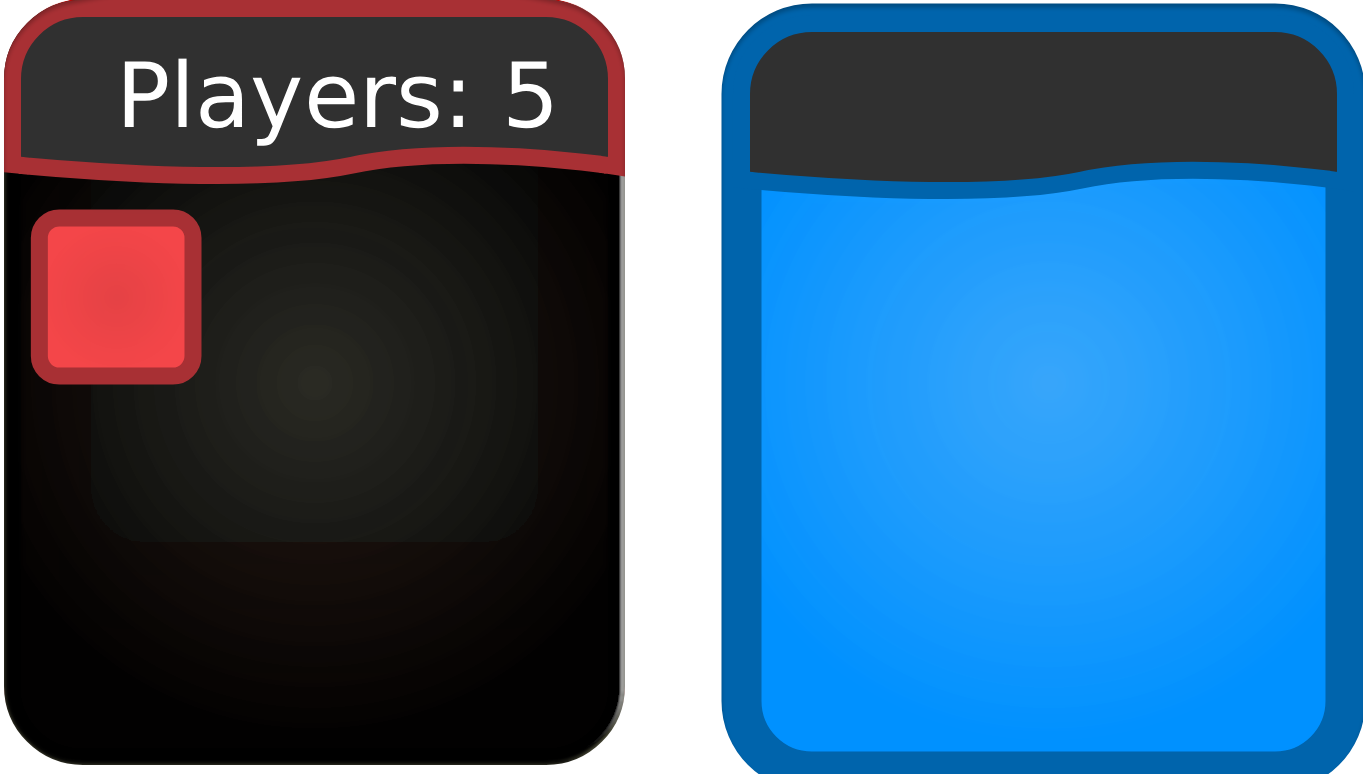
<style>
.page{position:relative;width:1363px;height:774px}
.page>*{position:absolute;margin:0}
.t1{font:90px "Fredoka One";color:#ffffff}
</style>
<div class="page">
<p class="t1" style="left:124px;top:58px;width:428px;height:88px">Players: 5</p>
</div>
